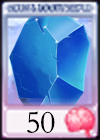
<style>
.page{position:relative;width:100px;height:140px}
.page>*{position:absolute;margin:0}
.t1{font:32px "STKaiti";color:#000000}
</style>
<div class="page">
<p class="t1" style="left:27px;top:111px;width:28px;height:22px">50</p>
</div>
